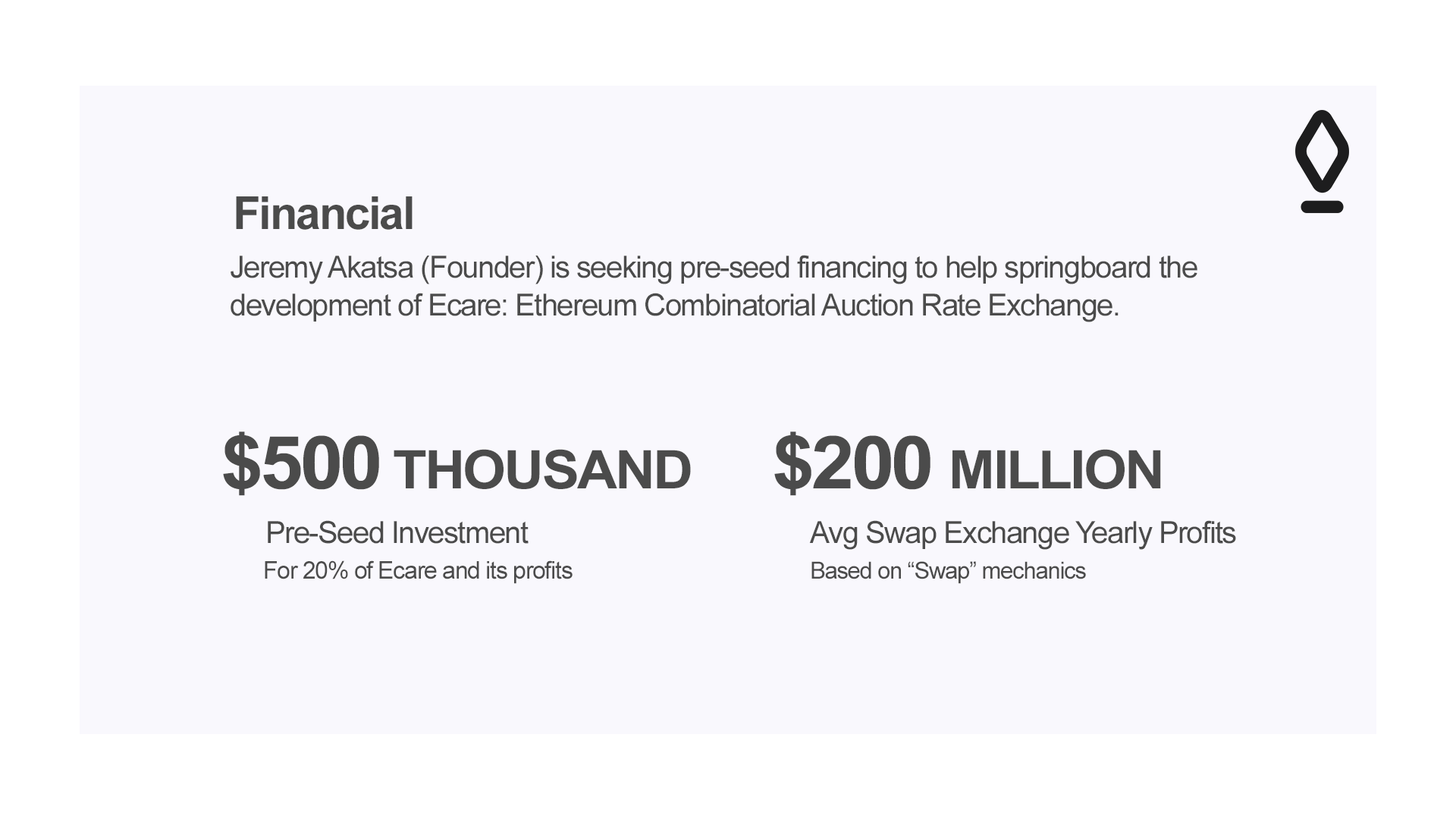
<style>
.page{position:relative;width:1456px;height:819px;background:#f9f8fd}
.page>*{position:absolute;margin:0}
.t1{font:45.5px "Arial-BoldMT";letter-spacing:-0.04em;color:#4b4b4b}
.t2{font:30.3px/37.9px "ArialMT";letter-spacing:-0.04em;color:#4b4b4b}
.t3{font:53.1px "Arial-BoldMT";letter-spacing:-0.04em;color:#4b4b4b;scale:1.05 1}
.t4{font:73.1px "Arial-BoldMT";letter-spacing:-0.04em;color:#4b4b4b;scale:1.05 1}
.t5{font:30.3px "ArialMT";letter-spacing:-0.04em;color:#4b4b4b}
.t6{font:24.3px "ArialMT";letter-spacing:-0.04em;color:#4b4b4b}
.t7{font:23.5px "ArialMT";letter-spacing:-0.04em;color:#4b4b4b}
</style>
<div class="page">
<p class="t1" style="left:236px;top:196px;width:177px;height:34px">Financial</p>
<p class="t2" style="left:231px;top:255px;width:966px;height:67px">Jeremy Akatsa (Founder) is seeking pre-seed financing to help springboard the<br>development of Ecare: Ethereum Combinatorial Auction Rate Exchange.</p>
<p class="t3" style="left:223px;top:431px;width:468px;height:65px"><span class="t4">$500</span> THOUSAND</p>
<p class="t3" style="left:774px;top:431px;width:387px;height:65px"><span class="t4">$200 </span>MILLION</p>
<p class="t5" style="left:268px;top:520px;width:261px;height:24px">Pre-Seed Investment</p>
<p class="t5" style="left:809px;top:520px;width:427px;height:30px">Avg Swap Exchange Yearly Profits</p>
<p class="t6" style="left:265px;top:560px;width:308px;height:24px">For 20% of Ecare and its profits</p>
<p class="t7" style="left:811px;top:561px;width:275px;height:23px">Based on “Swap” mechanics</p>
</div>
